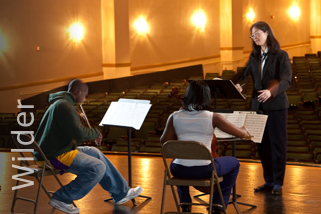
<style>
.page{position:relative;width:321px;height:214px}
.page>*{position:absolute;margin:0}
.t1{font:30px "Tahoma";letter-spacing:0.05em;color:#b4b1ad}
</style>
<div class="page">
<p class="t1" style="left:10px;top:99px;width:25px;height:92px;rotate:-90deg">Wilder</p>
</div>
